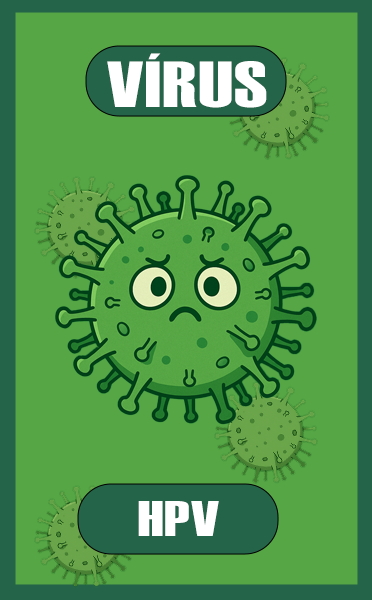
<style>
.page{position:relative;width:372px;height:600px;background:#56a645}
.page>*{position:absolute;margin:0}
.t1{font:65px "Haettenschweiler";letter-spacing:0.015em;color:#ffffff;scale:1.35 1}
.t2{font:50px "Haettenschweiler";letter-spacing:0.015em;color:#ffffff;scale:1.35 1}
</style>
<div class="page">
<p class="t1" style="left:107px;top:53px;width:160px;height:55px">VÍRUS</p>
<p class="t2" style="left:138px;top:501px;width:81px;height:35px">HPV</p>
</div>
